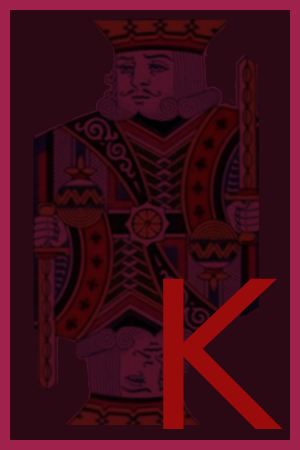
<style>
.page{position:relative;width:300px;height:450px;background:#2a0914}
.page>*{position:absolute;margin:0}
.t1{font:206px "DejaVuSans";color:#9a0b0b}
</style>
<div class="page">
<p class="t1" style="left:163px;top:278px;width:120px;height:151px">K</p>
</div>
